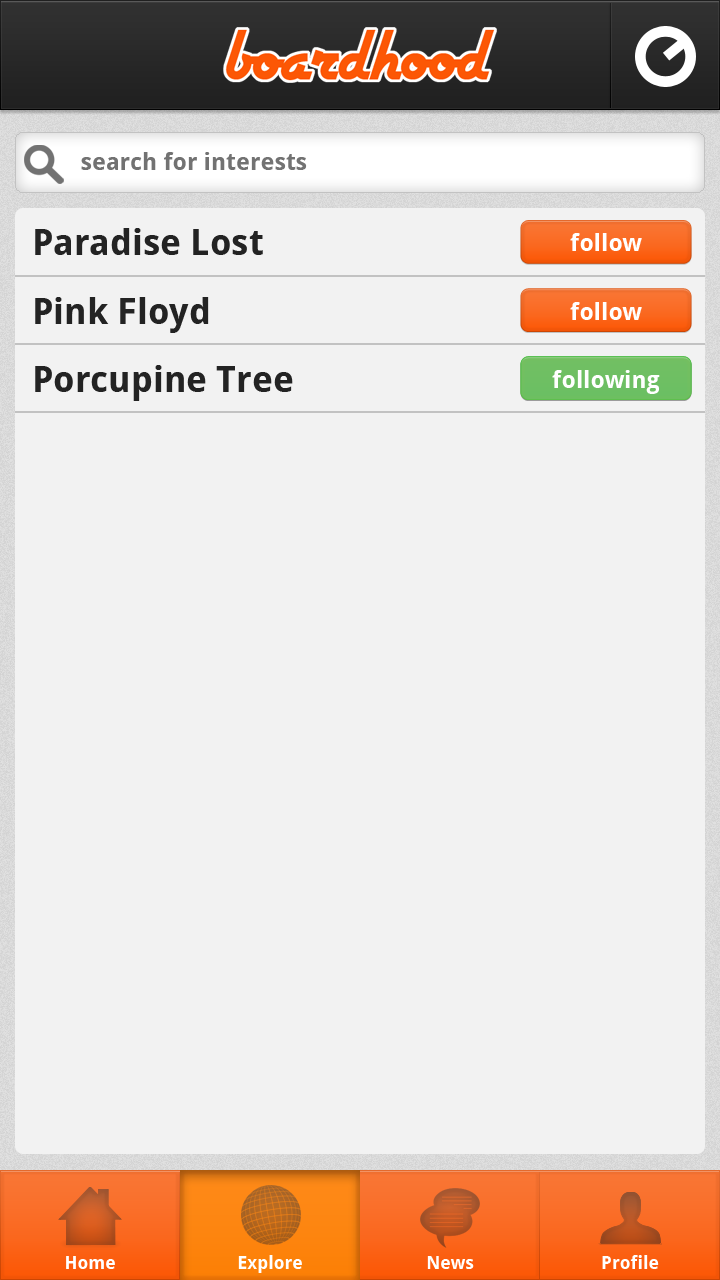
<style>
.page{position:relative;width:720px;height:1280px;background:#f2f2f2}
.page>*{position:absolute;margin:0}
.t1{font:24px "DroidSans-Bold";color:#727272}
.t2{font:36px "DroidSans-Bold";color:#232323}
.t3{font:24px "DroidSans-Bold";color:#ffffff}
.t4{font:18px "DroidSans-Bold";color:#ffffff}
</style>
<div class="page">
<p class="t1" style="left:81px;top:152px;width:226px;height:18px">search for interests</p>
<p class="t2" style="left:35px;top:228px;width:228px;height:27px">Paradise Lost</p>
<p class="t3" style="left:570px;top:233px;width:72px;height:18px">follow</p>
<p class="t2" style="left:35px;top:297px;width:174px;height:36px">Pink Floyd</p>
<p class="t3" style="left:570px;top:302px;width:72px;height:18px">follow</p>
<p class="t2" style="left:35px;top:365px;width:258px;height:36px">Porcupine Tree</p>
<p class="t3" style="left:552px;top:370px;width:108px;height:24px">following</p>
<p class="t4" style="left:66px;top:1256px;width:49px;height:13px">Home</p>
<p class="t4" style="left:238px;top:1255px;width:64px;height:18px">Explore</p>
<p class="t4" style="left:427px;top:1256px;width:47px;height:13px">News</p>
<p class="t4" style="left:602px;top:1255px;width:57px;height:14px">Profile</p>
</div>
